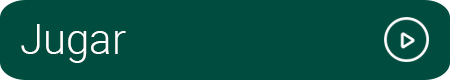
<style>
.page{position:relative;width:450px;height:80px;background:#004d40}
.page>*{position:absolute;margin:0}
.t1{font:41.7px "Roboto-Light";color:#ffffff}
</style>
<div class="page">
<p class="t1" style="left:21px;top:24px;width:105px;height:39px">Jugar</p>
</div>
